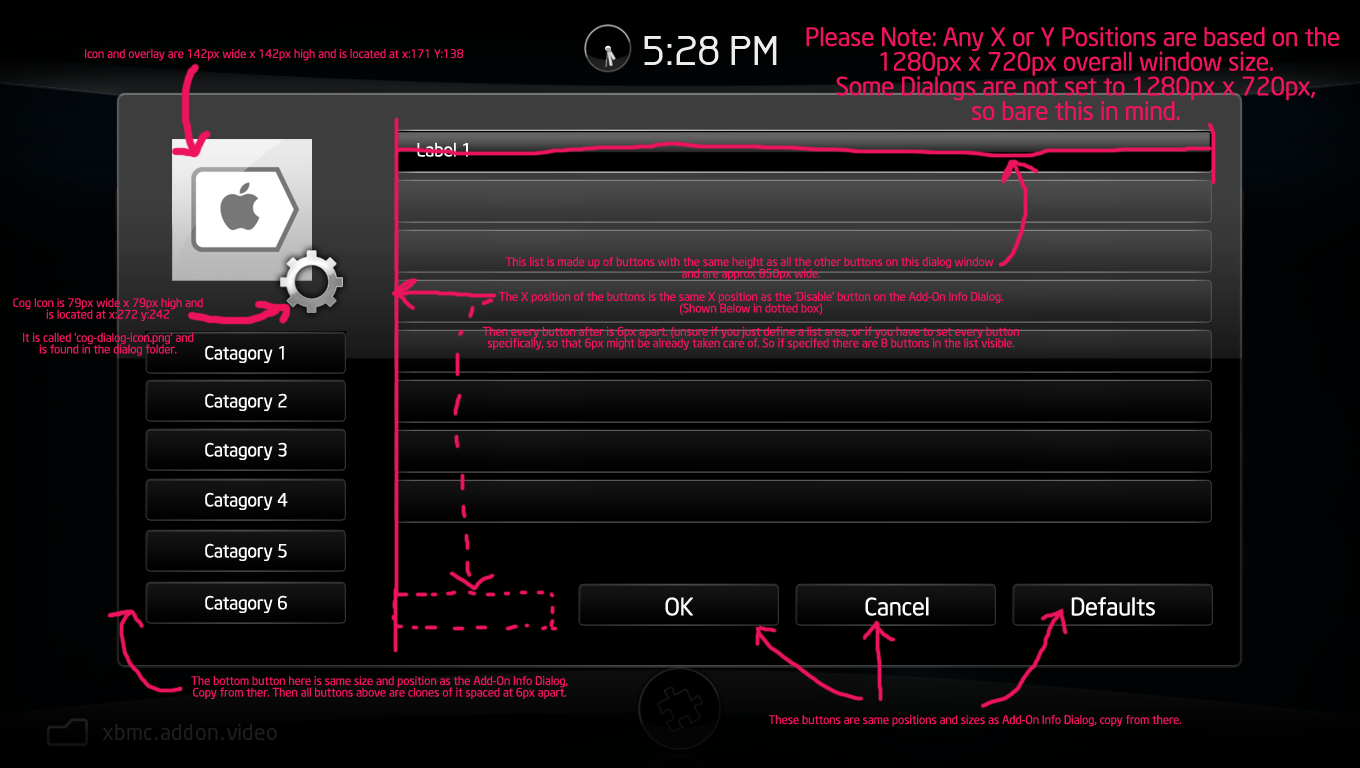
<style>
.page{position:relative;width:1360px;height:768px}
.page>*{position:absolute;margin:0}
.t1{font:25px/24.6px "NeoSansIntel";color:#ed145b}
.t2{font:11.8px "NeoSansIntel";color:#ed145b}
.t3{font:18px "NeoSansIntel";color:#ffffff}
.t4{font:11.8px/11.6px "NeoSansIntel";color:#ed145b}
.t5{font:24px "NeoSansIntel";color:#ffffff}
</style>
<div class="page">
<p class="t1" style="left:806px;top:27px;width:534px;height:94px;text-align:center">Please Note: Any X or Y Positions are based on the <br>1280px x 720px overall window size.<br>Some Dialogs are not set to 1280px x 720px,<br>so bare this in mind.</p>
<p class="t2" style="left:85px;top:49px;width:379px;height:12px">Icon and overlay are 142px wide x 142px high and is located at x:171 Y:138</p>
<p class="t3" style="left:417px;top:142px;width:51px;height:15px">Label 1</p>
<p class="t4" style="left:482px;top:257px;width:537px;height:93px;text-align:center">This list is made up of buttons with the same height as all the other buttons on this dialog window <br>and are approx 850px wide.<br><br>The X position of the buttons is the same X position as the ‘Disable’ button on the Add-On Info Dialog.<br>(Shown Below in dotted box)<br><br>Then every button after is 6px apart. (unsure if you just define a list area, or if you have to set every button<br>specifically, so that 6px might be already taken care of. So if specifed there are 8 buttons in the list visible.</p>
<p class="t4" style="left:13px;top:298px;width:190px;height:58px;text-align:center">Cog Icon is 79px wide x 79px high and<br>is located at x:272 y:242<br><br>It is called ‘cog-dialog-icon.png’ and<br>is found in the dialog folder.</p>
<p class="t3" style="left:205px;top:345px;width:79px;height:19px">Catagory 1</p>
<p class="t3" style="left:205px;top:393px;width:82px;height:19px">Catagory 2</p>
<p class="t3" style="left:205px;top:442px;width:82px;height:19px">Catagory 3</p>
<p class="t3" style="left:205px;top:492px;width:83px;height:19px">Catagory 4</p>
<p class="t3" style="left:205px;top:543px;width:82px;height:19px">Catagory 5</p>
<p class="t3" style="left:205px;top:595px;width:82px;height:19px">Catagory 6</p>
<p class="t5" style="left:665px;top:597px;width:28px;height:19px">OK</p>
<p class="t5" style="left:865px;top:597px;width:64px;height:19px">Cancel</p>
<p class="t5" style="left:1071px;top:597px;width:84px;height:19px">Defaults</p>
<p class="t4" style="left:191px;top:676px;width:377px;height:23px;text-align:center">The bottom button here is same size and position as the Add-On Info Dialog, <br>Copy from ther. Then all buttons above are clones of it spaced at 6px apart.</p>
<p class="t2" style="left:768px;top:715px;width:413px;height:12px">These buttons are same positions and sizes as Add-On Info Dialog, copy from there.</p>
</div>
